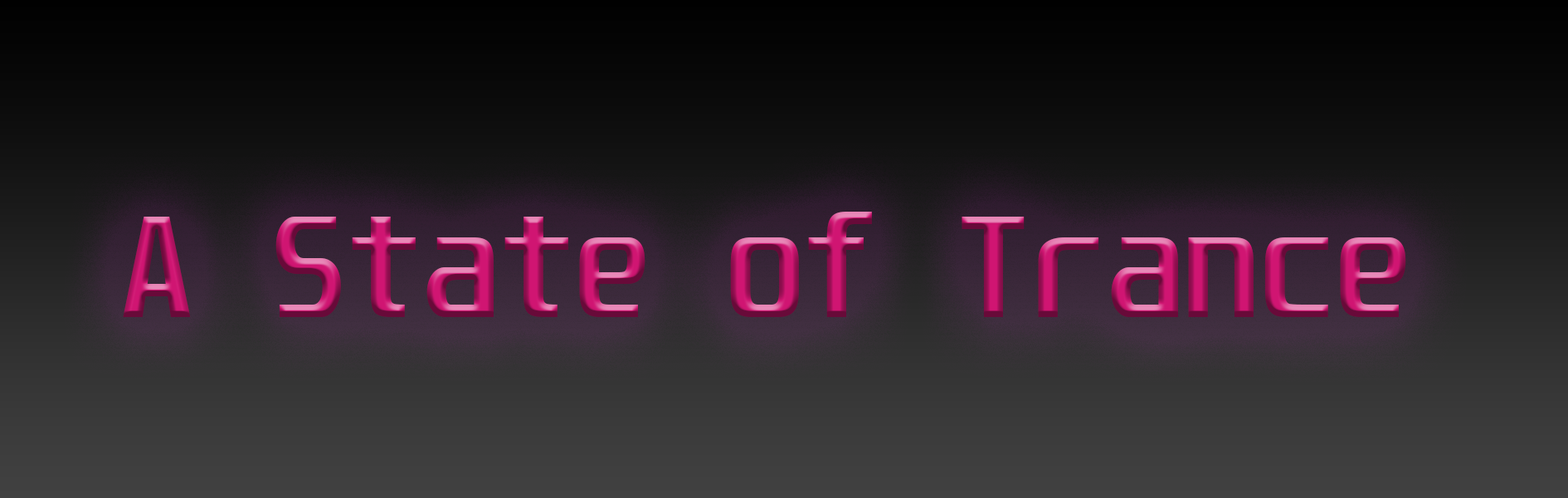
<style>
.page{position:relative;width:1568px;height:498px}
.page>*{position:absolute;margin:0}
.t1{font:124.4px "Unispace-Bold"}
</style>
<div class="page">
<p class="t1" style="left:123px;top:212px;width:1283px;height:105px">A State of Trance</p>
</div>
